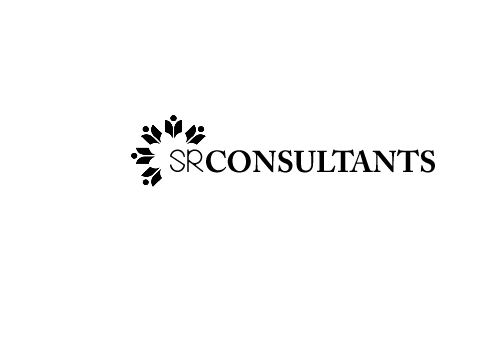
<style>
.page{position:relative;width:504px;height:360px;background:#ffffff}
.page>*{position:absolute;margin:0}
.t1{font:30px "ACaslonPro-Bold";color:#000000}
.t2{font:30px "Bireun";color:#000000}
</style>
<div class="page">
<p class="t1" style="left:170px;top:149px;width:265px;height:24px"><span class="t2">SR</span>CONSULTANTS</p>
</div>
